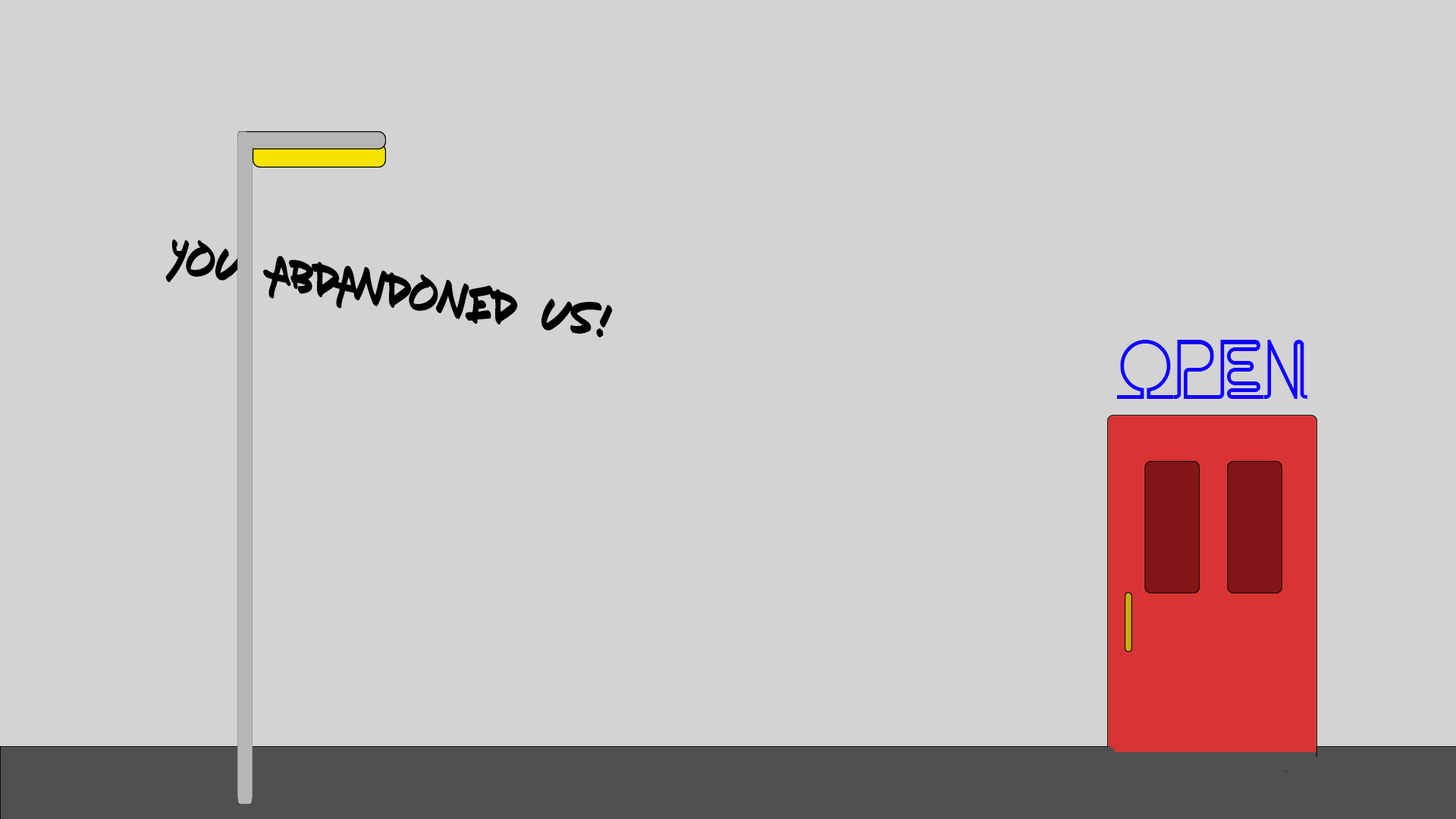
<style>
.page{position:relative;width:1456px;height:819px;background:#d3d3d3}
.page>*{position:absolute;margin:0}
.t1{font:46.5px "Fresh-Marker";color:#000000;scale:1.04 1}
.t2{font:73.5px "Neon";color:#1200ff;scale:0.96 1}
</style>
<div class="page">
<p class="t1" style="left:165px;top:239px;width:448px;height:98px;rotate:9deg">YOU ABDANDONED US!</p>
<p class="t2" style="left:1117px;top:340px;width:190px;height:59px">OPEN</p>
</div>
